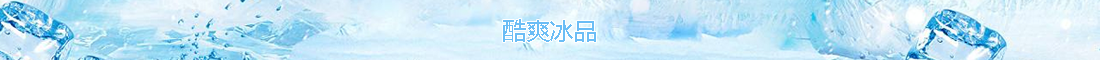
<style>
.page{position:relative;width:1100px;height:60px}
.page>*{position:absolute;margin:0}
.t1{font:24px "MicrosoftYaHeiUI";color:#6bbdf5}
</style>
<div class="page">
<p class="t1" style="left:503px;top:19px;width:93px;height:23px">酷爽冰品</p>
</div>
